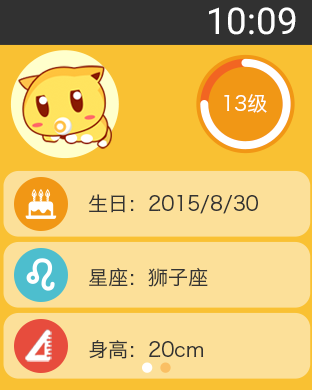
<style>
.page{position:relative;width:312px;height:390px;background:#fce099}
.page>*{position:absolute;margin:0}
.t1{font:36.7px "Roboto-Regular";color:#ffffff}
.t2{font:20px "HiraginoSansGB-W3";color:#ffffff}
.t3{font:20px "HiraginoSansGB-W3";color:#333333}
</style>
<div class="page">
<p class="t1" style="left:209px;top:7px;width:87px;height:28px">10:09</p>
<p class="t2" style="left:224px;top:94px;width:43px;height:19px">13级</p>
<p class="t3" style="left:88px;top:194px;width:170px;height:20px">生日：2015/8/30</p>
<p class="t3" style="left:89px;top:267px;width:119px;height:20px">星座：狮子座</p>
<p class="t3" style="left:89px;top:340px;width:115px;height:19px">身高：20cm</p>
</div>
